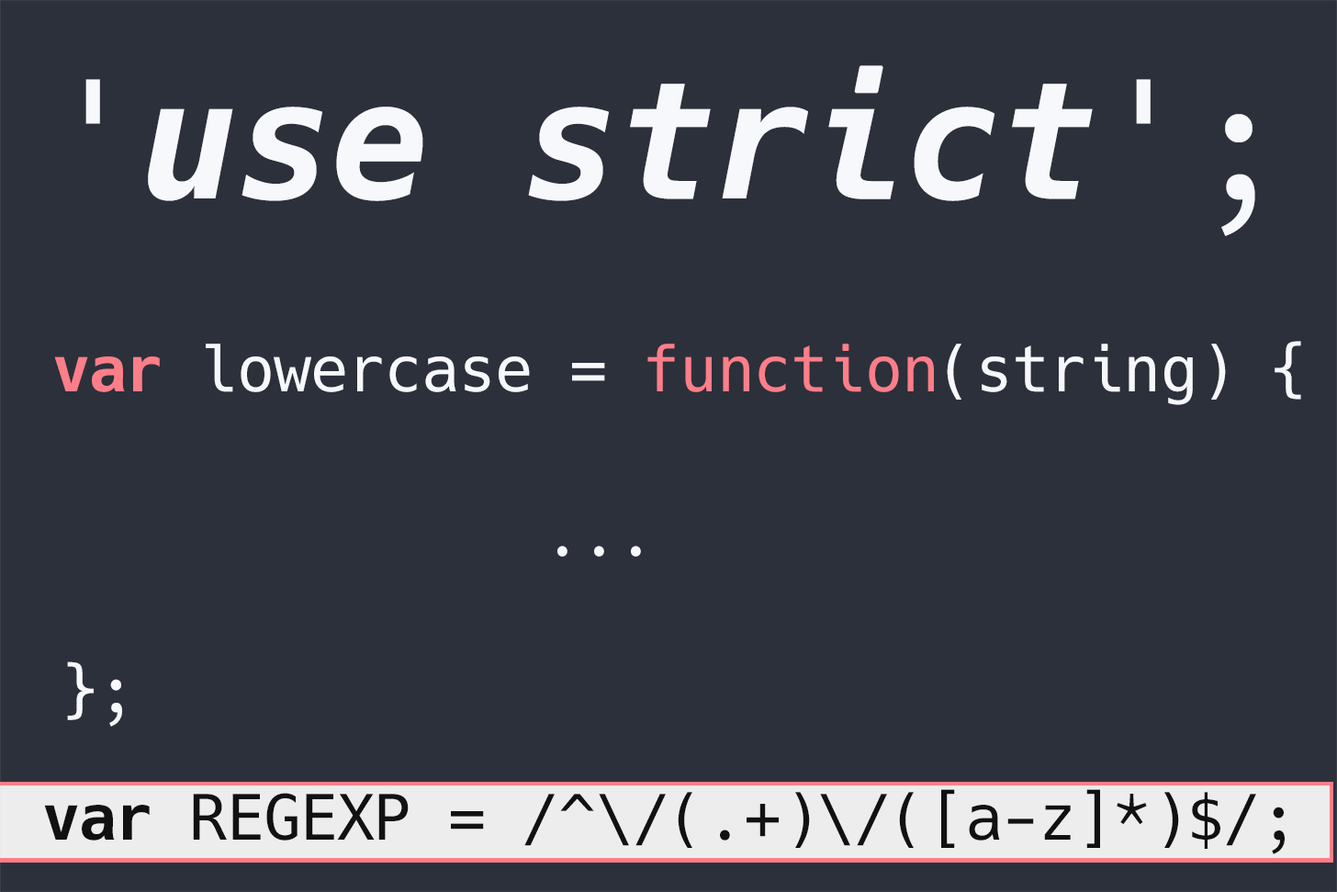
<style>
.page{position:relative;width:1337px;height:892px;background:#2b303b}
.page>*{position:absolute;margin:0}
.t1{font:163.2px "Hack-BoldOblique";letter-spacing:-0.015em;color:#f7f8fb}
.t2{font:163.2px "Hack-Regular";letter-spacing:-0.015em;color:#f7f8fb}
.t3{font:62.7px "Hack-Regular";letter-spacing:-0.015em;color:#f7f8fb}
.t4{font:62.7px "Hack-Bold";letter-spacing:-0.015em;color:#fc7e88}
.t5{font:62.7px "Hack-Regular";letter-spacing:-0.015em;color:#fc7e88}
.t6{font:62.7px "Hack-Regular";letter-spacing:-0.015em;color:#111111}
.t7{font:62.7px "Hack-Bold";letter-spacing:-0.015em;color:#111111}
</style>
<div class="page">
<p class="t1" style="left:85px;top:65px;width:1170px;height:171px"><span class="t2">'</span>use strict<span class="t2">';</span></p>
<p class="t3" style="left:54px;top:341px;width:1247px;height:64px"><span class="t4">var</span> lowercase = <span class="t5">function</span>(string) {</p>
<p class="t3" style="left:557px;top:546px;width:84px;height:11px">...</p>
<p class="t3" style="left:67px;top:661px;width:55px;height:65px">};</p>
<p class="t6" style="left:44px;top:789px;width:1241px;height:65px"><span class="t7">var</span> REGEXP = /^\/(.+)\/([a-z]*)$/;</p>
</div>
